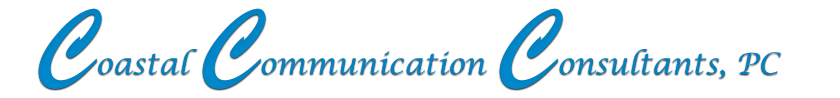
<style>
.page{position:relative;width:840px;height:98px;background:#ffffff}
.page>*{position:absolute;margin:0}
.t1{font:29.2px "LucidaCalligraphy-Italic";color:#0088cc}
.t2{font:100px "BrushScriptMT";color:#0088cc}
</style>
<div class="page">
<p class="t1" style="left:38px;top:8px;width:743px;height:81px"><span class="t2">C</span>oastal <span class="t2">C</span>ommunication <span class="t2">C</span>onsultants, PC</p>
</div>
